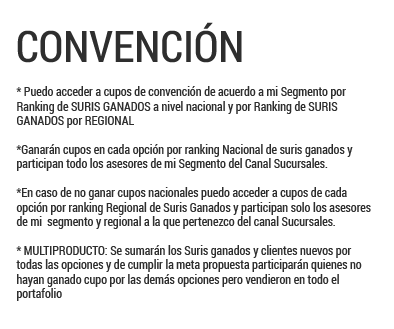
<style>
.page{position:relative;width:394px;height:329px;background:#ffffff}
.page>*{position:absolute;margin:0}
.t1{font:43px "RobotoCondensed-Regular";color:#2e2e2e;text-transform:uppercase}
.t2{font:12px "RobotoCondensed-Regular";color:#2e2e2e}
</style>
<div class="page">
<p class="t1" style="left:17px;top:22px;width:225px;height:41px">convención</p>
<p class="t2" style="left:16px;top:86px;width:355px;height:215px">* Puedo acceder a cupos de convención de acuerdo a mi Segmento por Ranking de SURIS GANADOS a nivel nacional y por Ranking de SURIS GANADOS por REGIONAL<br><br>*Ganarán cupos en cada opción por ranking Nacional de suris ganados y participan todo los asesores de mi Segmento del Canal Sucursales.<br><br>*En caso de no ganar cupos nacionales puedo acceder a cupos de cada opción por ranking Regional de Suris Ganados y participan solo los asesores de mi  segmento y regional a la que pertenezco del canal Sucursales.<br><br>* MULTIPRODUCTO: Se sumarán los Suris ganados y clientes nuevos por todas las opciones y de cumplir la meta propuesta participarán quienes no hayan ganado cupo por las demás opciones pero vendieron en todo el portafolio</p>
</div>
